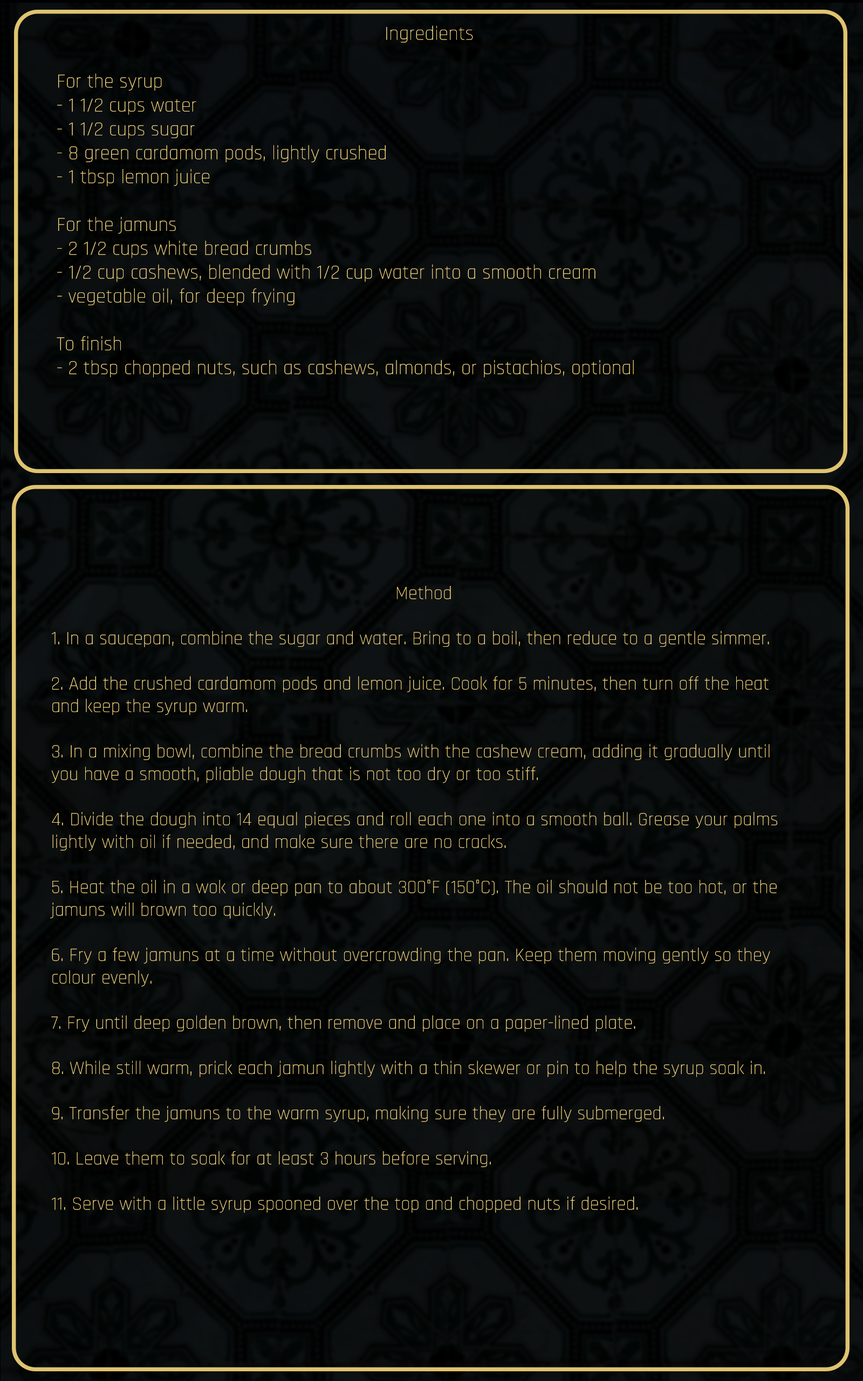
<style>
.page{position:relative;width:863px;height:1381px}
.page>*{position:absolute;margin:0}
.t1{font:19.9px "Rajdhani-Light";color:#ffdf82}
.t2{font:18.9px "Rajdhani-Light";color:#ffdf82}
</style>
<div class="page">
<p class="t1" style="left:57px;top:25px;width:577px;height:353px;text-align:center">Ingredients<br><br>For the syrup<br>- 1 1/2 cups water<br>- 1 1/2 cups sugar<br>- 8 green cardamom pods, lightly crushed<br>- 1 tbsp lemon juice<br><br>For the jamuns<br>- 2 1/2 cups white bread crumbs<br>- 1/2 cup cashews, blended with 1/2 cup water into a smooth cream<br>- vegetable oil, for deep frying<br><br>To finish<br>- 2 tbsp chopped nuts, such as cashews, almonds, or pistachios, optional</p>
<p class="t2" style="left:50px;top:586px;width:728px;height:627px;text-align:center">Method<br><br>1. In a saucepan, combine the sugar and water. Bring to a boil, then reduce to a gentle simmer.<br><br>2. Add the crushed cardamom pods and lemon juice. Cook for 5 minutes, then turn off the heat and keep the syrup warm.<br><br>3. In a mixing bowl, combine the bread crumbs with the cashew cream, adding it gradually until you have a smooth, pliable dough that is not too dry or too stiff.<br><br>4. Divide the dough into 14 equal pieces and roll each one into a smooth ball. Grease your palms lightly with oil if needed, and make sure there are no cracks.<br><br>5. Heat the oil in a wok or deep pan to about 300°F (150°C). The oil should not be too hot, or the jamuns will brown too quickly.<br><br>6. Fry a few jamuns at a time without overcrowding the pan. Keep them moving gently so they colour evenly.<br><br>7. Fry until deep golden brown, then remove and place on a paper-lined plate.<br><br>8. While still warm, prick each jamun lightly with a thin skewer or pin to help the syrup soak in.<br><br>9. Transfer the jamuns to the warm syrup, making sure they are fully submerged.<br><br>10. Leave them to soak for at least 3 hours before serving.<br><br>11. Serve with a little syrup spooned over the top and chopped nuts if desired.</p>
</div>
